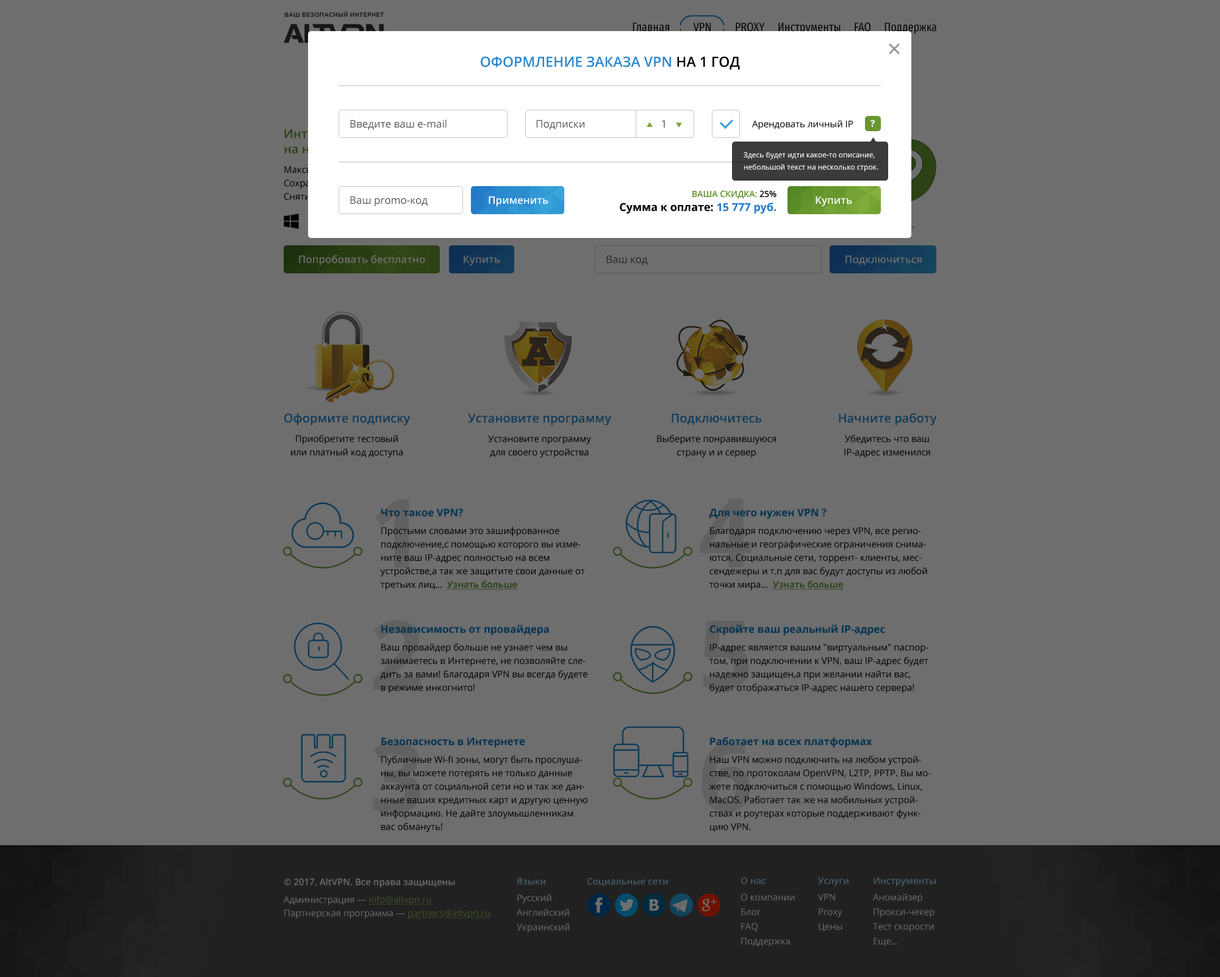
<style>
.page{position:relative;width:1220px;height:977px;background:#6e6e6e}
.page>*{position:absolute;margin:0}
.t1{font:12.2px "FiraSansExtraCondensed-Regular";color:#010000}
.t2{font:14px "OpenSans-Semibold";color:#2a87cd;text-transform:uppercase}
.t3{font:14px "OpenSans-Semibold";color:#000000;text-transform:uppercase}
.t4{font:10.4px "OpenSans";color:#585858}
.t5{font:9.2px "OpenSans";color:#000000}
.t6{font:9.2px "OpenSans-Bold";color:#fffffe}
.t7{font:10.4px "OpenSans-Semibold";color:#ffffff}
.t8{font:11px/14px "OpenSans-Bold";color:#000000}
.t9{font:8.5px/14px "OpenSans-Semibold";color:#5e902a;text-transform:uppercase}
.t10{font:8.5px/14px "OpenSans-Semibold";color:#000000;text-transform:uppercase}
.t11{font:11px/14px "OpenSans-Bold";color:#2379c8}
.t12{font:10.4px "OpenSans-Semibold";color:#6e6e6e}
.t13{font:10.4px "OpenSans";color:#262626}
.t14{font:9.2px/13.4px "OpenSans";color:#123a58}
.t15{font:12.2px/13.4px "OpenSans-Semibold";color:#123a58}
.t16{font:9.2px/13.4px "OpenSans"}
.t17{font:12.2px/13.4px "OpenSans-Semibold"}
.t18{font:9.2px/13.4px "OpenSans";color:#000000}
.t19{font:10.4px/12.2px "OpenSans-Bold";color:#0f78bf}
.t20{font:9.2px/13.4px "OpenSans-Semibold";color:#568619;text-decoration:underline}
.t21{font:10.4px/12.2px "OpenSans-Bold"}
.t22{font:9.2px/12.2px "OpenSans-Semibold";color:#6e6e6e}
.t23{font:9.2px/13.4px "OpenSans";color:#6e6e6e}
.t24{font:9.2px/13.4px "OpenSans";color:#6e6e6e;text-decoration:underline}
.t25{font:9.2px/14.6px "OpenSans"}
.t26{font:9.2px/14.6px "OpenSans-Semibold"}
.t27{font:9.2px "OpenSans-Semibold";color:#455d67}
</style>
<div class="page">
<p class="t1" style="left:633px;top:23px;width:304px;height:11px">Главная         VPN         PROXY     Инструменты     FAQ     Поддержка</p>
<p class="t2" style="left:481px;top:56px;width:259px;height:14px">Оформление заказа VPN <span class="t3">на 1 год</span></p>
<p class="t4" style="left:350px;top:120px;width:97px;height:10px">Введите ваш e-mail</p>
<p class="t4" style="left:536px;top:120px;width:49px;height:10px">Подписки</p>
<p class="t4" style="left:662px;top:120px;width:3px;height:8px">1</p>
<p class="t5" style="left:752px;top:120px;width:101px;height:9px">Арендовать личный IP</p>
<p class="t6" style="left:871px;top:120px;width:4px;height:7px">?</p>
<p class="t4" style="left:350px;top:196px;width:78px;height:10px">Ваш promo-код</p>
<p class="t7" style="left:489px;top:196px;width:60px;height:10px">Применить</p>
<p class="t8" style="left:620px;top:190px;width:157px;height:24px;text-align:right"><span class="t9">Ваша скидка: </span><span class="t10">25%<br></span>Сумма к оплате: <span class="t11">15 777 руб.</span></p>
<p class="t7" style="left:816px;top:196px;width:37px;height:10px">Купить</p>
<p class="t12" style="left:299px;top:255px;width:126px;height:10px">Попробовать бесплатно</p>
<p class="t12" style="left:464px;top:255px;width:36px;height:10px">Купить</p>
<p class="t13" style="left:607px;top:255px;width:41px;height:10px">Ваш код</p>
<p class="t12" style="left:846px;top:255px;width:76px;height:10px">Подключиться</p>
<p class="t14" style="left:284px;top:413px;width:127px;height:45px;text-align:center"><span class="t15">Оформите подписку<br><br></span>Приобретите тестовый<br>или платный код доступа</p>
<p class="t14" style="left:468px;top:414px;width:143px;height:44px;text-align:center"><span class="t15">Установите программу<br><br></span>Установите программу<br>для своего устройства</p>
<p class="t16" style="left:657px;top:414px;width:119px;height:44px;text-align:center"><span class="t17">Подключитесь<br><br></span>Выберите понравившуюся страну и и сервер</p>
<p class="t14" style="left:839px;top:413px;width:98px;height:45px;text-align:center"><span class="t15">Начните работу<br><br></span>Убедитесь что ваш<br>IP-адрес изменился</p>
<p class="t18" style="left:380px;top:508px;width:205px;height:82px"><span class="t19">Что такое VPN?<br><br></span>Простыми словами это зашифрованное подключение,с помощью которого вы измените ваш IP-адрес полностью на всем устройстве,а так же защитите свои данные от третьих лиц...  <span class="t20">Узнать больше</span></p>
<p class="t18" style="left:709px;top:508px;width:219px;height:82px"><span class="t19">Для чего нужен VPN ?<br><br></span>Благодаря подключению через VPN, все региональные и географические ограничения снимаются. Социальные сети, торрент- клиенты, мессендежеры и т.п для вас будут доступы из любой точки мира...  <span class="t20">Узнать больше</span></p>
<p class="t16" style="left:381px;top:624px;width:207px;height:69px"><span class="t21">Независимость от провайдера<br><br></span>Ваш провайдер больше не узнает чем вы занимаетесь в Интернете, не позволяйте следить за вами! Благодаря VPN вы всегда будете в режиме инкогнито!</p>
<p class="t16" style="left:710px;top:624px;width:219px;height:69px"><span class="t21">Скройте ваш реальный IP-адрес<br><br></span>IP-адрес является вашим "виртуальным" паспортом, при подключении к VPN, ваш IP-адрес будет надежно защищен,а при желании найти вас, будет отображаться IP-адрес нашего сервера!</p>
<p class="t18" style="left:381px;top:737px;width:207px;height:95px"><span class="t19">Безопасность в Интернете<br><br></span>Публичные Wi-fi зоны, могут быть прослушаны, вы можете потерять не только данные аккаунта от социальной сети но и так же дан-<br>нные ваших кредитных карт и другую ценную информацию. Не дайте злоумышленникам вас обмануть!</p>
<p class="t18" style="left:710px;top:737px;width:221px;height:95px"><span class="t19">Работает на всех платформах<br><br></span>Наш VPN можно подключить на любом устройстве, по протоколам OpenVPN, L2TP, PPTP. Вы мо-<br>жете подключиться с помощью Windows, Linux, MacOS. Работает так же на мобильных устройствах и роутерах которые поддерживают функцию VPN.</p>
<p class="t22" style="left:284px;top:878px;width:207px;height:40px">© 2017. AltVPN. Все права защищены<br><br><span class="t23">Администрация — </span><span class="t24">info@altvpn.ru<br></span><span class="t23">Партнерская программа — </span><span class="t24">partners@altvpn.ru</span></p>
<p class="t25" style="left:517px;top:878px;width:53px;height:54px"><span class="t26">Языки<br><br></span>Русский<br>Английский<br>Украинский</p>
<p class="t27" style="left:588px;top:878px;width:80px;height:9px">Социальные сети</p>
<p class="t25" style="left:741px;top:877px;width:54px;height:69px"><span class="t26">О нас<br><br></span>О компании<br>Блог<br>FAQ<br>Поддержка</p>
<p class="t25" style="left:818px;top:877px;width:31px;height:55px"><span class="t26">Услуги<br><br></span>VPN<br>Proxy<br>Цены</p>
<p class="t25" style="left:873px;top:877px;width:63px;height:69px"><span class="t26">Инструменты<br><br></span>Аномайзер<br>Прокси-чекер<br>Тест скорости<br>Еще...</p>
</div>
